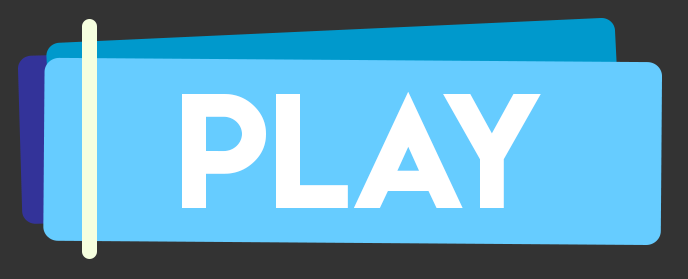
<style>
.page{position:relative;width:688px;height:279px;background:#66ccff}
.page>*{position:absolute;margin:0}
.t1{font:145px "LemonMilk";color:#ffffff;scale:1.04 1}
</style>
<div class="page">
<p class="t1" style="left:182px;top:91px;width:359px;height:117px">play</p>
</div>
